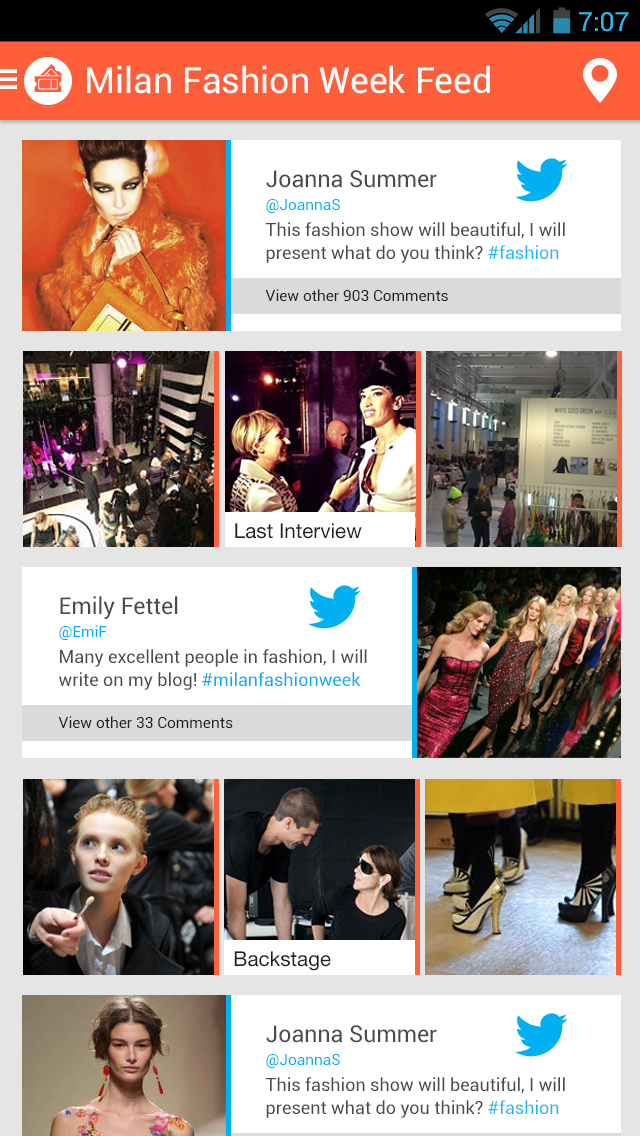
<style>
.page{position:relative;width:640px;height:1136px;background:#ffffff}
.page>*{position:absolute;margin:0}
.t1{font:26.6px "Roboto-Regular";color:#33b5e5}
.t2{font:35.8px "Roboto-Regular";color:#ffffff}
.t3{font:23.2px "Roboto-Regular";color:#4b4b4b}
.t4{font:15.5px "Roboto-Regular";color:#00b0f1}
.t5{font:18px/23.2px "Roboto-Regular";color:#4b4b4b}
.t6{font:18px/23.2px "Roboto-Regular";color:#21baf3}
.t7{font:15.5px "Roboto-Regular";color:#202020}
.t8{font:20.6px "HelveticaNeue";color:#202020}
.t9{font:18px/23.2px "Roboto-Regular";color:#00b0f1}
</style>
<div class="page">
<p class="t1" style="left:579px;top:12px;width:50px;height:20px">7:07</p>
<p class="t2" style="left:87px;top:65px;width:403px;height:29px">Milan Fashion Week Feed</p>
<p class="t3" style="left:266px;top:170px;width:171px;height:18px">Joanna Summer</p>
<p class="t4" style="left:266px;top:199px;width:74px;height:14px">@JoannaS</p>
<p class="t5" style="left:265px;top:222px;width:300px;height:41px">This fashion show will beautiful, I will present what do you think? <span class="t6">#fashion</span></p>
<p class="t7" style="left:265px;top:289px;width:183px;height:12px">View other 903 Comments</p>
<p class="t8" style="left:235px;top:523px;width:127px;height:16px">Last Interview</p>
<p class="t3" style="left:60px;top:596px;width:118px;height:23px">Emily Fettel</p>
<p class="t4" style="left:59px;top:625px;width:48px;height:15px">@EmiF</p>
<p class="t5" style="left:59px;top:649px;width:308px;height:41px">Many excellent people in fashion, I will<br>write on my blog! <span class="t9">#milanfashionweek</span></p>
<p class="t7" style="left:58px;top:716px;width:175px;height:12px">View other 33 Comments</p>
<p class="t8" style="left:234px;top:951px;width:97px;height:20px">Backstage</p>
<p class="t3" style="left:266px;top:1025px;width:171px;height:18px">Joanna Summer</p>
<p class="t4" style="left:266px;top:1054px;width:74px;height:14px">@JoannaS</p>
<p class="t5" style="left:265px;top:1077px;width:300px;height:41px">This fashion show will beautiful, I will present what do you think? <span class="t6">#fashion</span></p>
</div>
